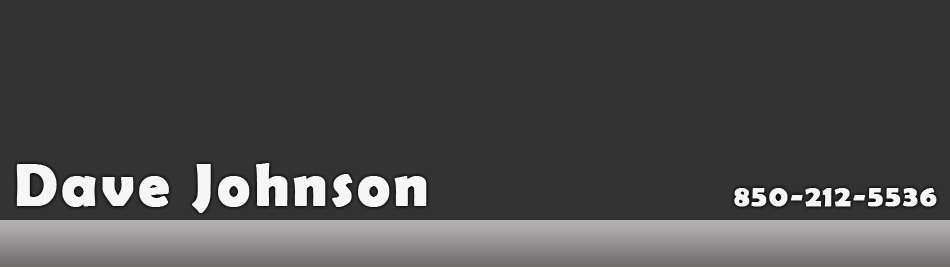
<style>
.page{position:relative;width:950px;height:267px;background:#333333}
.page>*{position:absolute;margin:0}
.t1{font:60px "BerlinSansFBDemi-Bold";letter-spacing:0.05em;color:#f6f6f6;font-weight:bold}
.t2{font:30px "BerlinSansFBDemi-Bold";letter-spacing:0.05em;color:#f6f6f6;font-variant:small-caps;font-weight:bold}
</style>
<div class="page">
<p class="t1" style="left:16px;top:163px;width:411px;height:50px">Dave Johnson</p>
<p class="t2" style="left:734px;top:188px;width:203px;height:19px">850-212-5536</p>
</div>
